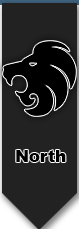
<style>
.page{position:relative;width:79px;height:229px;background:#222222}
.page>*{position:absolute;margin:0}
.t1{font:16.7px "Arial-Black";letter-spacing:-0.01em;color:#000000}
</style>
<div class="page">
<p class="t1" style="left:16px;top:150px;width:50px;height:12px">North</p>
</div>
